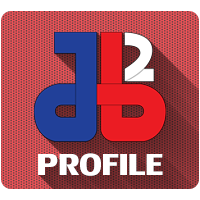
<style>
.page{position:relative;width:200px;height:200px}
.page>*{position:absolute;margin:0}
.t1{font:45px "LilyUPCBold";color:#ffffff}
</style>
<div class="page">
<p class="t1" style="left:38px;top:153px;width:125px;height:23px">PROFILE</p>
</div>
